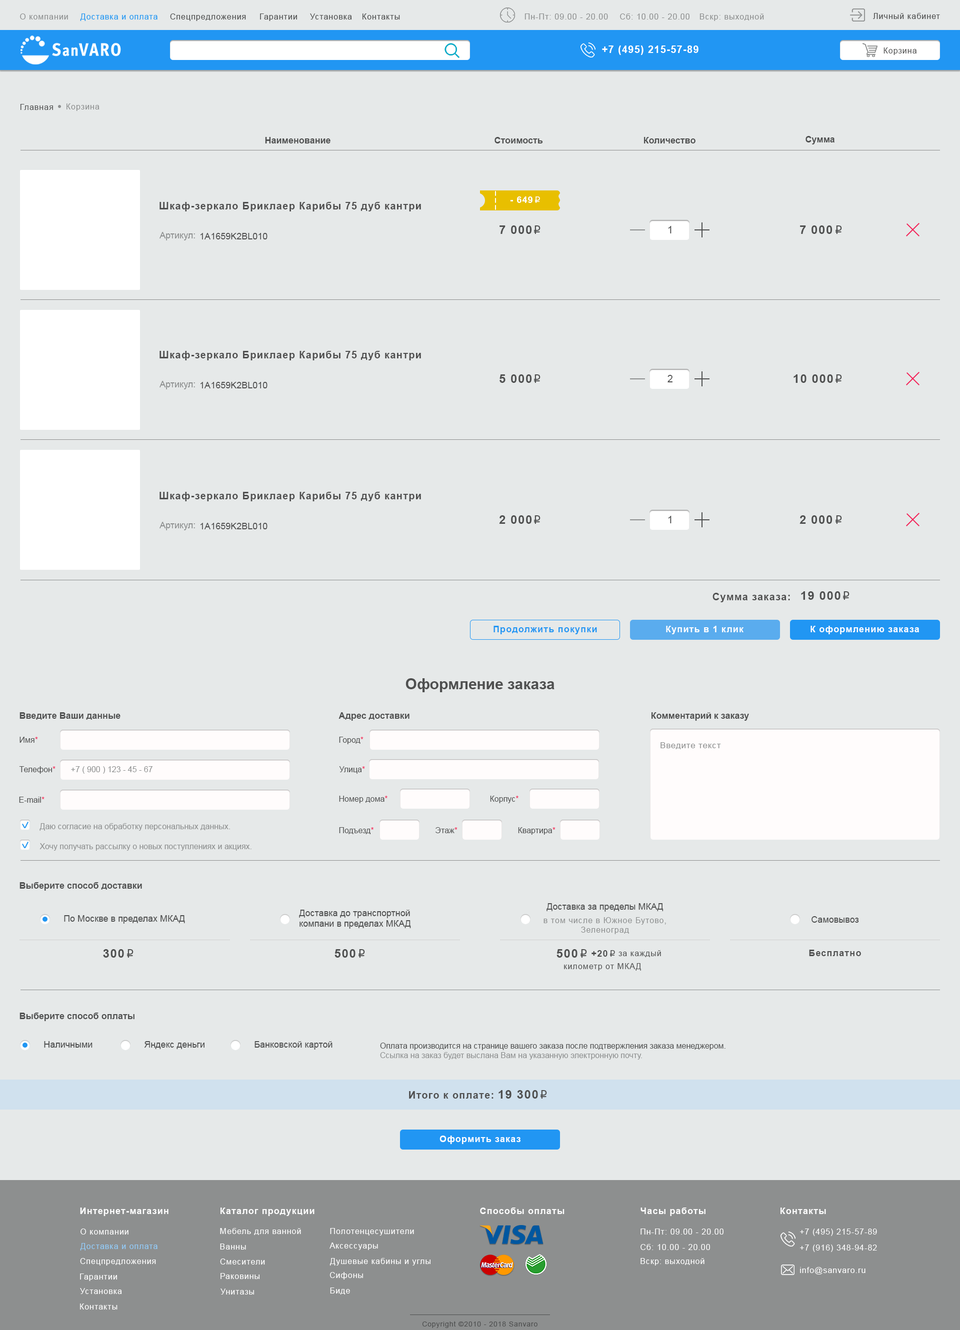
<style>
.page{position:relative;width:960px;height:1330px;background:#e6e9e9}
.page>*{position:absolute;margin:0}
.t1{font:8px "ArialMT";letter-spacing:0.065em;color:#4f5050}
.t2{font:8px "ArialMT";letter-spacing:0.065em;color:#8d8f8f}
.t3{font:9px "Arial-BoldMT";color:#4f5050}
.t4{font:9px "Arial-BoldMT";letter-spacing:0.065em;color:#ffffff}
.t5{font:9px "ALSRubl";letter-spacing:0.065em;color:#ffffff}
.t6{font:10px "Arial-BoldMT";letter-spacing:0.065em;color:#4f4f4f}
.t7{font:9px "ArialMT";color:#8d8f8f}
.t8{font:9px "ArialMT";color:#4f4f4f}
.t9{font:12px "Arial-BoldMT";letter-spacing:0.065em;color:#4f5050}
.t10{font:12px "ALSRubl";letter-spacing:0.065em;color:#4f5050}
.t11{font:10px "ArialMT";color:#4f5050}
.t12{font:9px "Arial-BoldMT";letter-spacing:0.065em;color:#2196f3}
.t13{font:15px "Arial-BoldMT";color:#4f5050}
.t14{font:8px "ArialMT";color:#4f5050}
.t15{font:8px "ArialMT";color:#f32157}
.t16{font:8px "ArialMT";letter-spacing:0.065em;color:#8d8f8f;scale:1.03 1}
.t17{font:8px "ArialMT";color:#8d8f8f}
.t18{font:9px "ArialMT";color:#4f5050}
.t19{font:9px "Arial-BoldMT";letter-spacing:0.065em;color:#4f5050}
.t20{font:9px "ALSRubl";letter-spacing:0.065em;color:#4f5050}
</style>
<div class="page">
<p class="t1" style="left:20px;top:104px;width:33px;height:6px">Главная</p>
<p class="t2" style="left:66px;top:104px;width:34px;height:7px">Корзина</p>
<p class="t3" style="left:265px;top:137px;width:65px;height:7px">Наименование</p>
<p class="t3" style="left:494px;top:137px;width:49px;height:7px">Стоимость</p>
<p class="t3" style="left:644px;top:137px;width:52px;height:7px">Количество</p>
<p class="t3" style="left:806px;top:136px;width:28px;height:8px">Сумма</p>
<p class="t4" style="left:510px;top:196px;width:22px;height:7px">- 649</p>
<p class="t5" style="left:535px;top:196px;width:5px;height:7px">i</p>
<p class="t6" style="left:160px;top:202px;width:261px;height:10px">Шкаф-зеркало Бриклаер Карибы 75 дуб кантри</p>
<p class="t7" style="left:160px;top:232px;width:35px;height:8px">Артикул:</p>
<p class="t8" style="left:200px;top:233px;width:68px;height:7px">1A1659K2BL010</p>
<p class="t9" style="left:500px;top:226px;width:32px;height:8px">7 000</p>
<p class="t10" style="left:534px;top:226px;width:6px;height:8px">i</p>
<p class="t11" style="left:668px;top:226px;width:4px;height:8px">1</p>
<p class="t9" style="left:800px;top:226px;width:32px;height:8px">7 000</p>
<p class="t10" style="left:836px;top:226px;width:6px;height:8px">i</p>
<p class="t6" style="left:160px;top:351px;width:261px;height:9px">Шкаф-зеркало Бриклаер Карибы 75 дуб кантри</p>
<p class="t9" style="left:500px;top:374px;width:32px;height:9px">5 000</p>
<p class="t10" style="left:534px;top:374px;width:6px;height:9px">i</p>
<p class="t11" style="left:668px;top:375px;width:4px;height:7px">2</p>
<p class="t9" style="left:794px;top:374px;width:39px;height:9px">10 000</p>
<p class="t10" style="left:836px;top:374px;width:6px;height:9px">i</p>
<p class="t7" style="left:160px;top:381px;width:35px;height:9px">Артикул:</p>
<p class="t8" style="left:200px;top:382px;width:68px;height:6px">1A1659K2BL010</p>
<p class="t6" style="left:160px;top:492px;width:261px;height:10px">Шкаф-зеркало Бриклаер Карибы 75 дуб кантри</p>
<p class="t9" style="left:499px;top:516px;width:33px;height:8px">2 000</p>
<p class="t10" style="left:534px;top:516px;width:6px;height:8px">i</p>
<p class="t11" style="left:668px;top:516px;width:4px;height:8px">1</p>
<p class="t9" style="left:800px;top:516px;width:32px;height:8px">2 000</p>
<p class="t10" style="left:836px;top:516px;width:6px;height:8px">i</p>
<p class="t7" style="left:160px;top:522px;width:35px;height:8px">Артикул:</p>
<p class="t8" style="left:200px;top:523px;width:68px;height:7px">1A1659K2BL010</p>
<p class="t6" style="left:712px;top:593px;width:78px;height:9px">Сумма заказа:</p>
<p class="t9" style="left:801px;top:592px;width:39px;height:8px">19 000</p>
<p class="t10" style="left:843px;top:592px;width:7px;height:8px">i</p>
<p class="t12" style="left:494px;top:626px;width:103px;height:8px">Продолжить покупки</p>
<p class="t4" style="left:666px;top:626px;width:78px;height:8px">Купить в 1 клик</p>
<p class="t4" style="left:810px;top:626px;width:109px;height:8px">К оформлению заказа</p>
<p class="t13" style="left:406px;top:678px;width:148px;height:14px">Оформление заказа</p>
<p class="t3" style="left:20px;top:712px;width:100px;height:8px">Введите Ваши данные</p>
<p class="t3" style="left:338px;top:712px;width:72px;height:9px">Адрес доставки</p>
<p class="t3" style="left:652px;top:712px;width:97px;height:9px">Комментарий к заказу</p>
<p class="t14" style="left:20px;top:737px;width:18px;height:6px">Имя<span class="t15">*</span></p>
<p class="t14" style="left:339px;top:737px;width:25px;height:7px">Город<span class="t15">*</span></p>
<p class="t16" style="left:660px;top:742px;width:61px;height:8px">Введите текст</p>
<p class="t14" style="left:19px;top:766px;width:37px;height:8px">Телефон<span class="t15">*</span></p>
<p class="t17" style="left:71px;top:766px;width:81px;height:8px">+7 ( 900 ) 123 - 45 - 67</p>
<p class="t14" style="left:339px;top:766px;width:26px;height:8px">Улица<span class="t15">*</span></p>
<p class="t14" style="left:19px;top:797px;width:25px;height:6px">E-mail<span class="t15">*</span></p>
<p class="t14" style="left:339px;top:796px;width:49px;height:8px">Номер дома<span class="t15">*</span></p>
<p class="t14" style="left:490px;top:796px;width:28px;height:8px">Корпус<span class="t15">*</span></p>
<p class="t17" style="left:40px;top:824px;width:190px;height:7px">Даю согласие на обработку персональных данных.</p>
<p class="t14" style="left:339px;top:828px;width:35px;height:6px">Подъезд<span class="t15">*</span></p>
<p class="t14" style="left:436px;top:828px;width:22px;height:6px">Этаж<span class="t15">*</span></p>
<p class="t14" style="left:518px;top:828px;width:38px;height:7px">Квартира<span class="t15">*</span></p>
<p class="t17" style="left:40px;top:844px;width:212px;height:7px">Хочу получать рассылку о новых поступлениях и акциях.</p>
<p class="t3" style="left:20px;top:882px;width:122px;height:9px">Выберите способ доставки</p>
<p class="t18" style="left:546px;top:904px;width:118px;height:8px">Доставка за пределы МКАД</p>
<p class="t18" style="left:64px;top:916px;width:121px;height:8px">По Москве в пределах МКАД</p>
<p class="t18" style="left:299px;top:910px;width:112px;height:19px">Доставка до транспортной<br>компани в пределах МКАД</p>
<p class="t2" style="left:544px;top:918px;width:122px;height:16px;text-align:center">в том числе в Южное Бутово,<br>Зеленоград</p>
<p class="t18" style="left:812px;top:916px;width:47px;height:7px">Самовывоз</p>
<p class="t9" style="left:103px;top:950px;width:21px;height:8px">300</p>
<p class="t10" style="left:127px;top:950px;width:7px;height:8px">i</p>
<p class="t9" style="left:334px;top:950px;width:22px;height:8px">500</p>
<p class="t10" style="left:358px;top:950px;width:7px;height:8px">i</p>
<p class="t9" style="left:556px;top:950px;width:22px;height:8px">500</p>
<p class="t10" style="left:580px;top:950px;width:7px;height:8px">i</p>
<p class="t19" style="left:592px;top:950px;width:16px;height:7px">+20</p>
<p class="t20" style="left:610px;top:950px;width:5px;height:7px">i</p>
<p class="t1" style="left:618px;top:950px;width:43px;height:8px">за каждый</p>
<p class="t19" style="left:809px;top:950px;width:52px;height:6px">Бесплатно</p>
<p class="t1" style="left:564px;top:964px;width:77px;height:7px">километр от МКАД</p>
<p class="t3" style="left:20px;top:1013px;width:114px;height:9px">Выберите способ оплаты</p>
<p class="t18" style="left:44px;top:1042px;width:48px;height:6px">Наличными</p>
<p class="t18" style="left:144px;top:1042px;width:60px;height:8px">Яндекс деньги</p>
<p class="t18" style="left:254px;top:1042px;width:78px;height:8px">Банковской картой</p>
<p class="t14" style="left:380px;top:1043px;width:346px;height:17px">Оплата производится на странице вашего заказа после подтвержления заказа менеджером. <br><span class="t17">Ссылка на заказ будет выслана Вам на указанную электронную почту.</span></p>
<p class="t6" style="left:409px;top:1092px;width:85px;height:7px">Итого к оплате:</p>
<p class="t9" style="left:498px;top:1090px;width:40px;height:9px">19 300</p>
<p class="t10" style="left:540px;top:1090px;width:7px;height:9px">i</p>
<p class="t4" style="left:440px;top:1136px;width:80px;height:8px">Оформить заказ</p>
</div>
